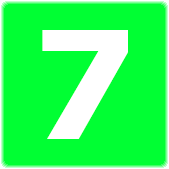
<style>
.page{position:relative;width:169px;height:169px;background:#00ff33}
.page>*{position:absolute;margin:0}
.t1{font:150px "Verdana-Bold";color:#ffffff;text-transform:uppercase}
</style>
<div class="page">
<p class="t1" style="left:42px;top:30px;width:86px;height:109px">7</p>
</div>
